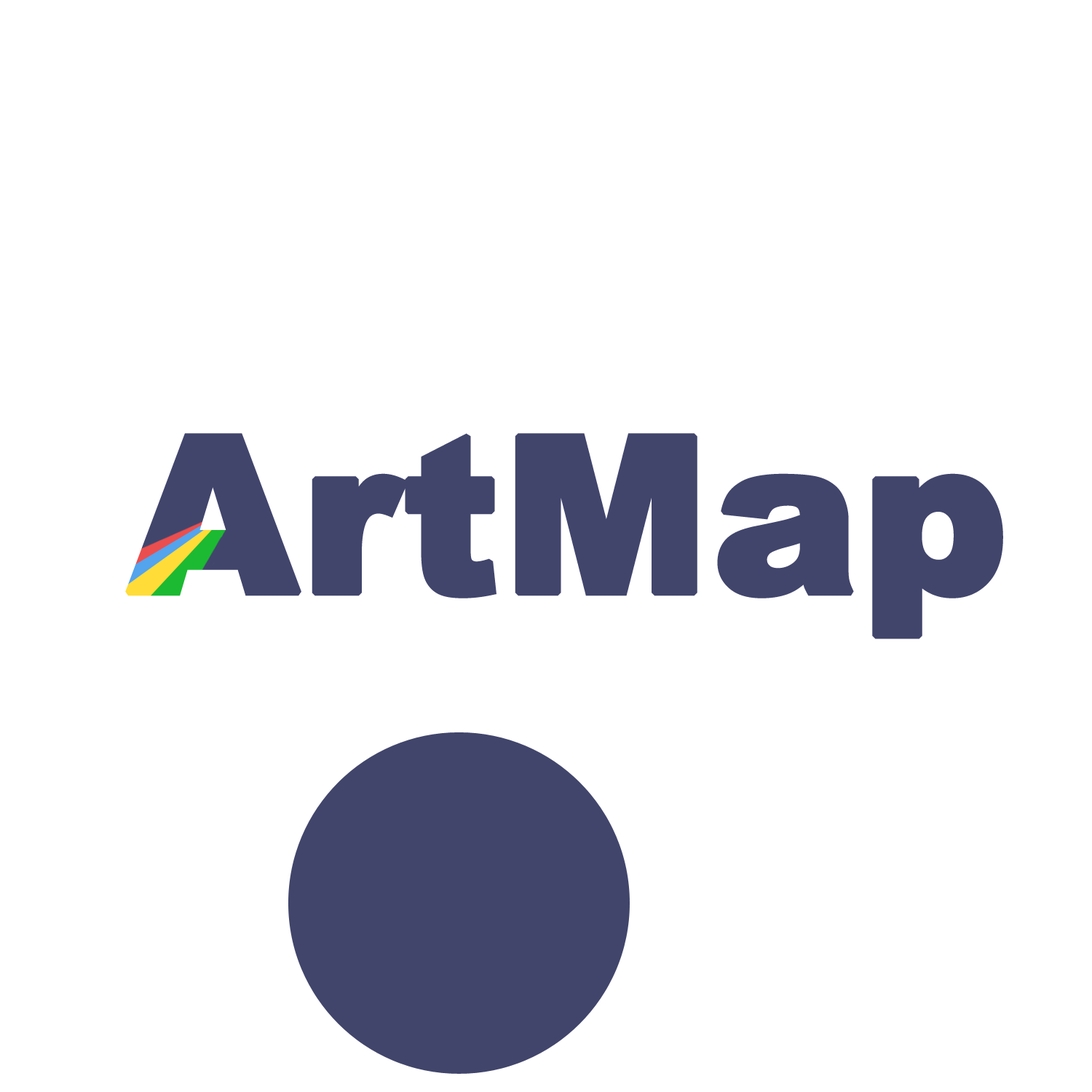
<style>
.page{position:relative;width:1092px;height:1092px;background:#ffffff}
.page>*{position:absolute;margin:0}
.t1{font:218.4px "Arial-Black";letter-spacing:-0.01em;color:#41456c;font-weight:bold}
</style>
<div class="page">
<p class="t1" style="left:125px;top:433px;width:878px;height:206px">ArtMap</p>
</div>
